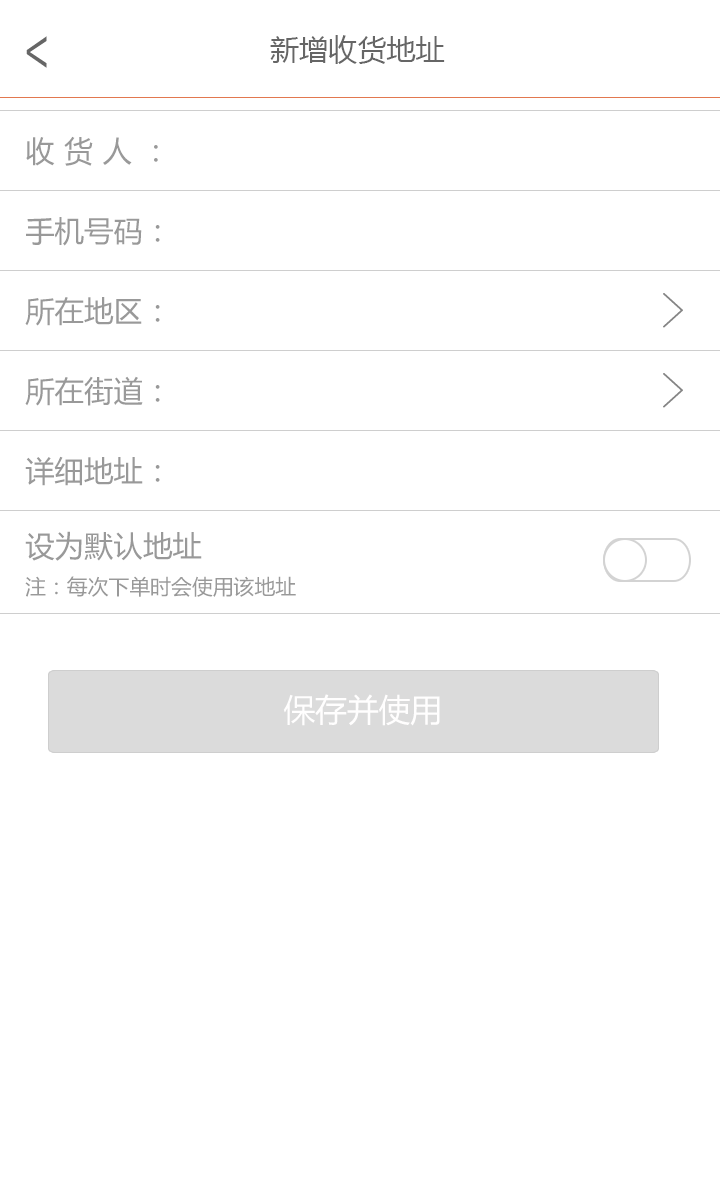
<style>
.page{position:relative;width:720px;height:1185px;background:#ffffff}
.page>*{position:absolute;margin:0}
.t1{font:51.9px "AdobeHeitiStd-Regular";color:#666666;scale:0.72 1}
.t2{font:29.2px "MicrosoftYaHei";color:#666666}
.t3{font:29.5px "MicrosoftYaHei";letter-spacing:0.32em;color:#999999}
.t4{font:29.5px "MicrosoftYaHei";color:#999999}
.t5{font:29.5px "MicrosoftYaHei";letter-spacing:0.005em;color:#999999}
.t6{font:20.8px/37.5px "MicrosoftYaHei";letter-spacing:0.005em;color:#999999}
.t7{font:29.5px/37.5px "MicrosoftYaHei";letter-spacing:0.005em;color:#999999}
.t8{font:31.7px "MicrosoftYaHei";color:#fffefe}
</style>
<div class="page">
<p class="t1" style="left:26px;top:36px;width:21px;height:32px;rotate:180deg">&gt;</p>
<p class="t2" style="left:270px;top:35px;width:175px;height:29px">新增收货地址</p>
<p class="t3" style="left:26px;top:136px;width:132px;height:30px">收货人<span class="t4">：</span></p>
<p class="t5" style="left:26px;top:217px;width:134px;height:29px">手机号码：</p>
<p class="t5" style="left:25px;top:297px;width:135px;height:29px">所在地区：</p>
<p class="t5" style="left:25px;top:376px;width:135px;height:30px">所在街道：</p>
<p class="t5" style="left:25px;top:456px;width:135px;height:30px">详细地址：</p>
<p class="t6" style="left:25px;top:531px;width:271px;height:66px"><span class="t7">设为默认地址<br></span>注：每次下单时会使用该地址</p>
<p class="t8" style="left:283px;top:694px;width:157px;height:32px">保存并使用</p>
<p class="t8" style="left:283px;top:694px;width:157px;height:32px">保存并使用</p>
</div>
